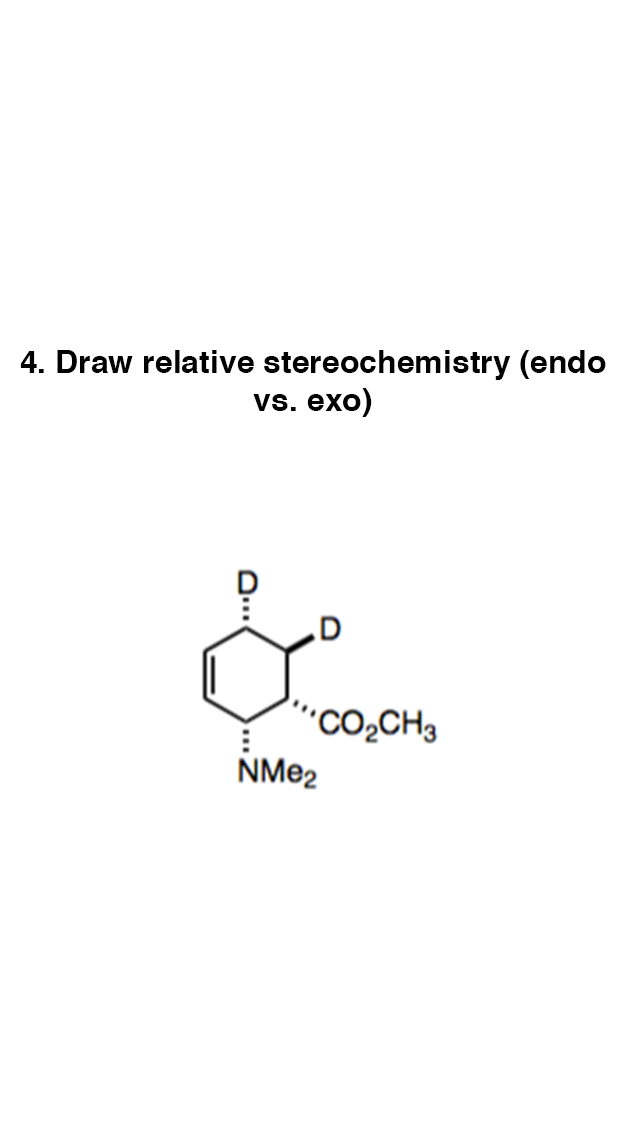
<style>
.page{position:relative;width:640px;height:1136px;background:#ffffff}
.page>*{position:absolute;margin:0}
.t1{font:32px "Helvetica-Bold";color:#000000}
</style>
<div class="page">
<p class="t1" style="left:20px;top:350px;width:586px;height:67px;text-align:center">4. Draw relative stereochemistry (endo vs. exo)</p>
</div>
